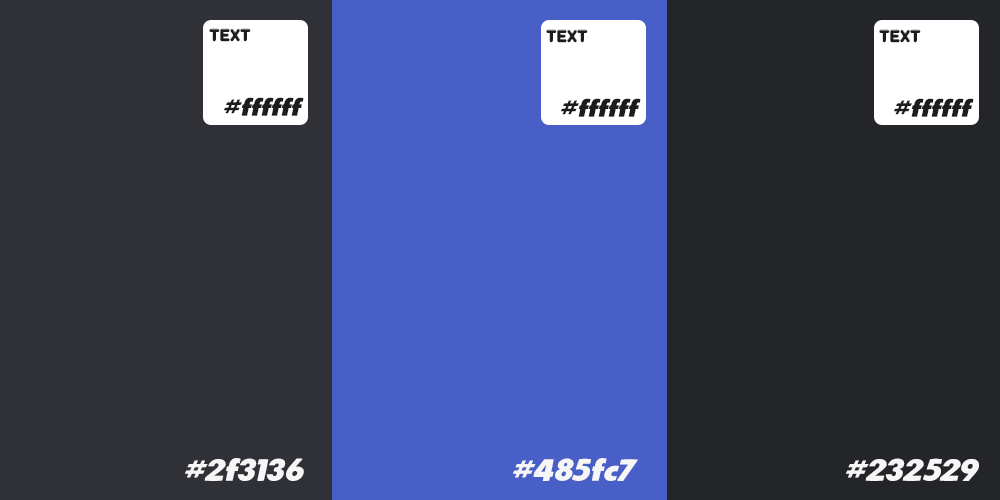
<style>
.page{position:relative;width:1000px;height:500px;background:#485fc7}
.page>*{position:absolute;margin:0}
.t1{font:16px "SpongyPERSONALUSEONLY-Regular";color:#1c1c1d}
.t2{font:24px "LeanRegular";color:#1c1c1d}
.t3{font:30px "LeanRegular";color:#f7f6f6}
</style>
<div class="page">
<p class="t1" style="left:209px;top:28px;width:42px;height:14px">Text</p>
<p class="t1" style="left:546px;top:29px;width:42px;height:14px">Text</p>
<p class="t1" style="left:879px;top:29px;width:42px;height:14px">Text</p>
<p class="t2" style="left:224px;top:97px;width:80px;height:19px">#ffffff</p>
<p class="t2" style="left:561px;top:98px;width:80px;height:19px">#ffffff</p>
<p class="t2" style="left:894px;top:98px;width:80px;height:19px">#ffffff</p>
<p class="t3" style="left:185px;top:458px;width:119px;height:23px">#2f3136</p>
<p class="t3" style="left:513px;top:458px;width:125px;height:23px">#485fc7</p>
<p class="t3" style="left:846px;top:458px;width:133px;height:23px">#232529</p>
</div>
